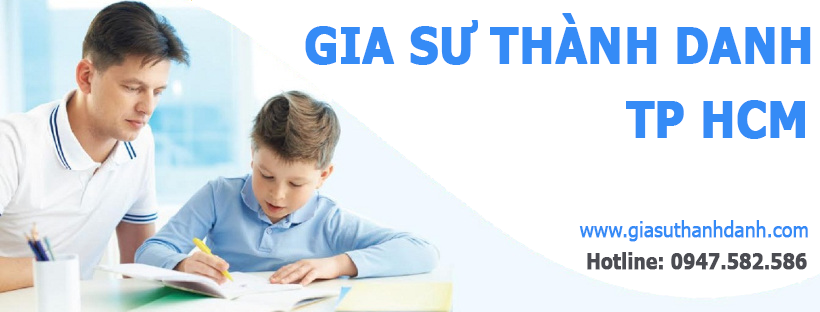
<style>
.page{position:relative;width:820px;height:312px;background:#ffffff}
.page>*{position:absolute;margin:0}
.t1{font:50.3px "Tahoma-Bold";color:#358bf6;font-weight:bold;scale:0.9 1}
.t2{font:20.7px "Tahoma";color:#358bf6;font-weight:bold;scale:0.9 1}
.t3{font:20.7px "Tahoma-Bold";color:#4b4c52;font-weight:bold;scale:0.9 1}
</style>
<div class="page">
<p class="t1" style="left:305px;top:13px;width:506px;height:52px">GIA SƯ THÀNH DANH</p>
<p class="t1" style="left:626px;top:100px;width:179px;height:39px">TP HCM</p>
<p class="t2" style="left:579px;top:220px;width:229px;height:22px">www.giasuthanhdanh.com</p>
<p class="t3" style="left:587px;top:252px;width:220px;height:18px">Hotline: 0947.582.586</p>
</div>
